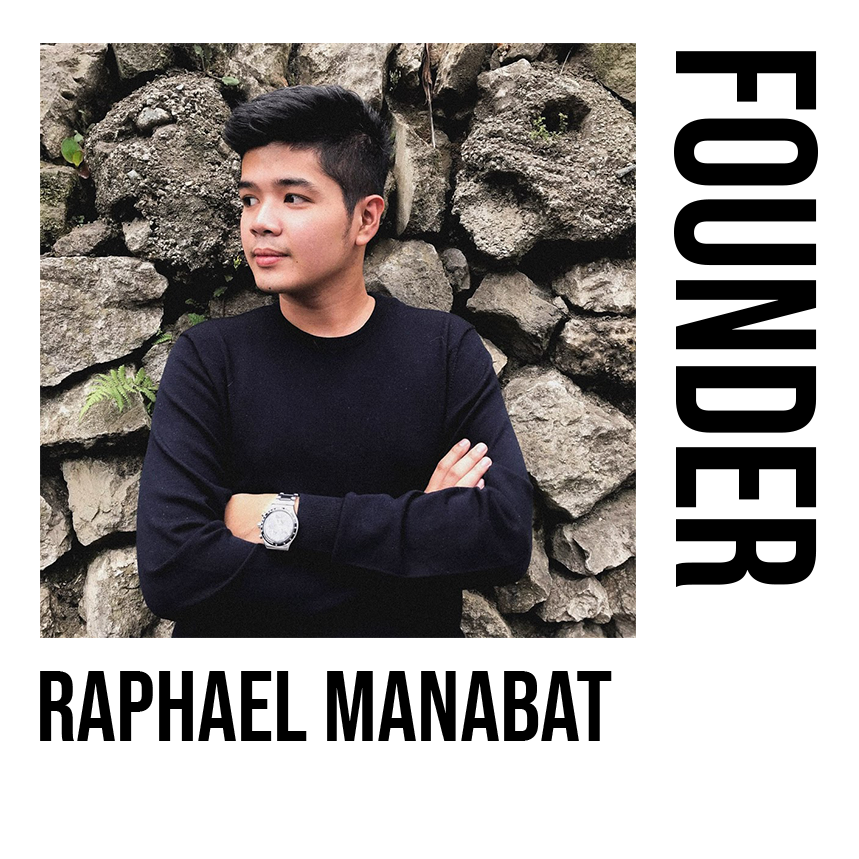
<style>
.page{position:relative;width:859px;height:859px;background:#ffffff}
.page>*{position:absolute;margin:0}
.t1{font:200px "BebasNeue-Regular";color:#000000}
.t2{font:100px "BebasNeue-Regular";color:#000000}
</style>
<div class="page">
<p class="t1" style="left:674px;top:51px;width:144px;height:536px;rotate:90deg">FOUNDER</p>
<p class="t2" style="left:40px;top:671px;width:572px;height:70px">Raphael manabat</p>
</div>
